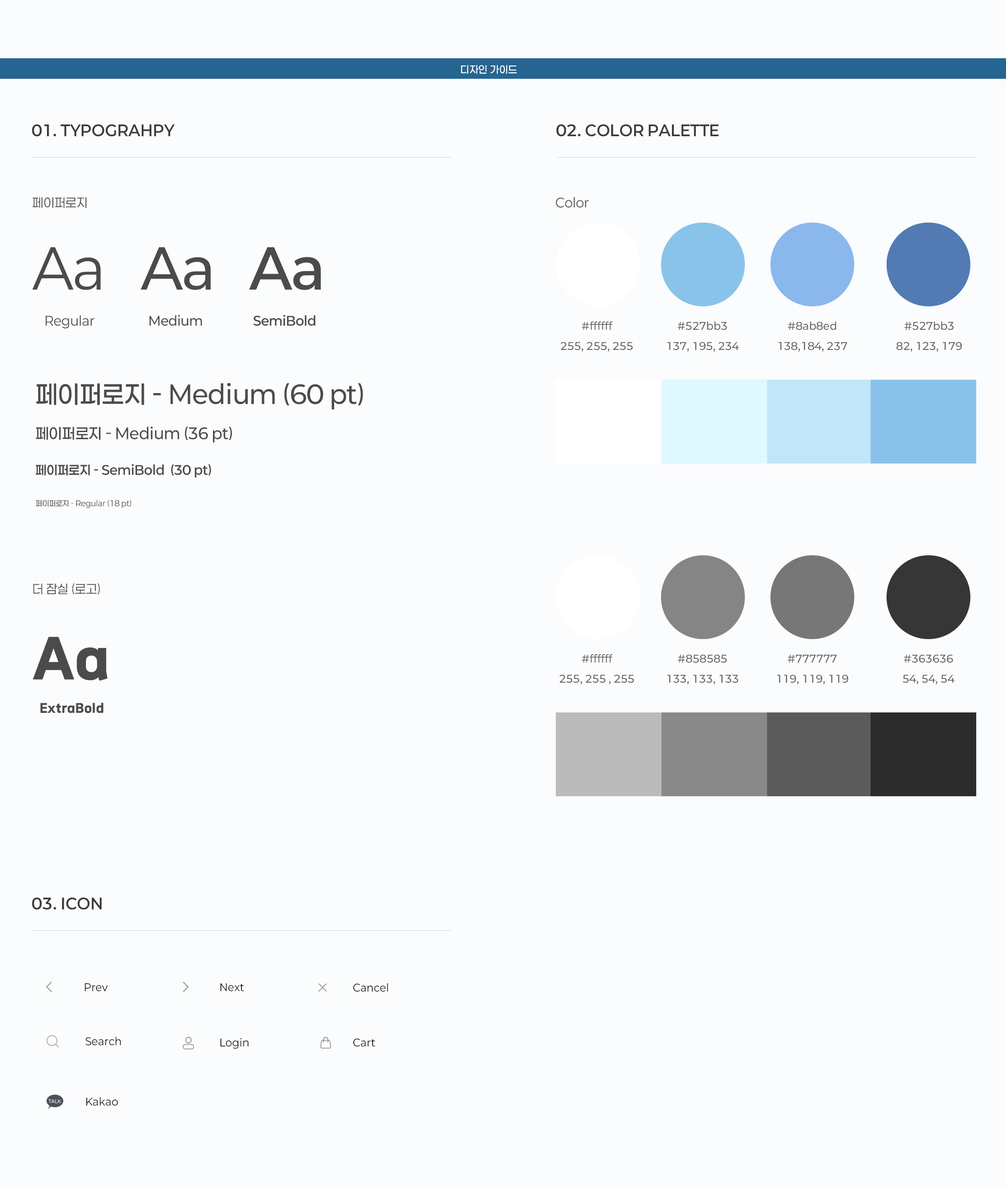
<style>
.page{position:relative;width:1006px;height:1186px;background:#fafcfe}
.page>*{position:absolute;margin:0}
.t1{font:10.1px "Paperlogy-5Medium";letter-spacing:0.025em;color:#ffffff}
.t2{font:15.1px "Paperlogy-6SemiBold";letter-spacing:0.025em;color:#3b3b3b}
.t3{font:12.6px "Paperlogy-4Regular";color:#565656}
.t4{font:54.5px "Paperlogy-4Regular";color:#4b4b4b}
.t5{font:54.5px "Paperlogy-5Medium";color:#4b4b4b}
.t6{font:54.5px "Paperlogy-6SemiBold";color:#4b4b4b}
.t7{font:12.6px "Paperlogy-4Regular";color:#4b4b4b}
.t8{font:12.6px "Paperlogy-5Medium";color:#4b4b4b}
.t9{font:12.6px "Paperlogy-6SemiBold";color:#4b4b4b}
.t10{font:10.1px/20.1px "Paperlogy-5Medium";letter-spacing:0.025em;color:#656565}
.t11{font:25.1px "Paperlogy-5Medium";color:#4b4b4b}
.t12{font:15.1px "Paperlogy-5Medium";color:#4b4b4b}
.t13{font:7.5px "Paperlogy-4Regular";color:#4b4b4b}
.t14{font:54.5px "TheJamsilOTF6ExtraBold";color:#4b4b4b}
.t15{font:12.6px "TheJamsilOTF6ExtraBold";color:#4b4b4b}
.t16{font:10.1px "Paperlogy-4Regular";letter-spacing:0.025em;color:#1e1d1d}
.t17{font:4.6px "Paperlogy-4Regular";letter-spacing:0.025em;color:#ffffff}
</style>
<div class="page">
<p class="t1" style="left:461px;top:65px;width:56px;height:9px">디자인 가이드</p>
<p class="t2" style="left:32px;top:124px;width:143px;height:13px">01. TYPOGRAHPY</p>
<p class="t2" style="left:556px;top:124px;width:163px;height:13px">02. COLOR PALETTE</p>
<p class="t3" style="left:33px;top:197px;width:54px;height:11px">페이퍼로지</p>
<p class="t3" style="left:556px;top:197px;width:33px;height:11px">Color</p>
<p class="t4" style="left:32px;top:247px;width:69px;height:43px">Aa</p>
<p class="t5" style="left:140px;top:247px;width:71px;height:43px">Aa</p>
<p class="t6" style="left:249px;top:247px;width:72px;height:43px">Aa</p>
<p class="t7" style="left:46px;top:315px;width:48px;height:13px">Regular</p>
<p class="t8" style="left:149px;top:315px;width:53px;height:11px">Medium</p>
<p class="t9" style="left:253px;top:315px;width:63px;height:11px">SemiBold</p>
<p class="t10" style="left:560px;top:321px;width:73px;height:31px;text-align:center">#ffffff<br>255, 255, 255</p>
<p class="t10" style="left:667px;top:321px;width:72px;height:31px;text-align:center">#527bb3<br>137, 195, 234</p>
<p class="t10" style="left:778px;top:321px;width:69px;height:31px;text-align:center">#8ab8ed<br>138,184, 237</p>
<p class="t10" style="left:896px;top:321px;width:66px;height:31px;text-align:center">#527bb3<br>82, 123, 179</p>
<p class="t11" style="left:36px;top:383px;width:327px;height:26px">페이퍼로지 - Medium (60 pt)</p>
<p class="t12" style="left:36px;top:426px;width:196px;height:16px">페이퍼로지 - Medium (36 pt)</p>
<p class="t9" style="left:36px;top:464px;width:175px;height:14px">페이퍼로지 - SemiBold  (30 pt)</p>
<p class="t13" style="left:36px;top:499px;width:95px;height:9px">페이퍼로지 - Regular (18 pt)</p>
<p class="t3" style="left:33px;top:583px;width:67px;height:12px">더 잠실 (로고)</p>
<p class="t14" style="left:33px;top:636px;width:75px;height:44px">Aa</p>
<p class="t10" style="left:559px;top:654px;width:75px;height:30px;text-align:center">#ffffff<br>255, 255 , 255</p>
<p class="t10" style="left:667px;top:654px;width:71px;height:30px;text-align:center">#858585<br>133, 133, 133</p>
<p class="t10" style="left:777px;top:654px;width:71px;height:30px;text-align:center">#777777<br>119, 119, 119</p>
<p class="t10" style="left:903px;top:654px;width:51px;height:30px;text-align:center">#363636<br>54, 54, 54</p>
<p class="t15" style="left:40px;top:703px;width:63px;height:10px">ExtraBold</p>
<p class="t2" style="left:32px;top:897px;width:70px;height:13px">03. ICON</p>
<p class="t16" style="left:85px;top:983px;width:23px;height:8px">Prev</p>
<p class="t16" style="left:220px;top:983px;width:24px;height:8px">Next</p>
<p class="t16" style="left:353px;top:983px;width:35px;height:9px">Cancel</p>
<p class="t16" style="left:85px;top:1037px;width:36px;height:8px">Search</p>
<p class="t16" style="left:220px;top:1038px;width:28px;height:11px">Login</p>
<p class="t16" style="left:353px;top:1038px;width:22px;height:9px">Cart</p>
<p class="t16" style="left:86px;top:1097px;width:32px;height:9px">Kakao</p>
<p class="t17" style="left:48px;top:1099px;width:13px;height:4px">TALK</p>
</div>
